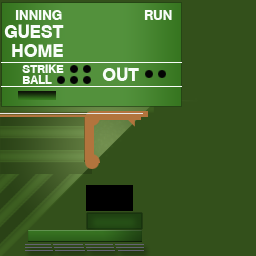
<style>
.page{position:relative;width:256px;height:256px;background:#33501b}
.page>*{position:absolute;margin:0}
.t1{font:14px "AGSchulbuchTwoBQ-Medium";color:#f8fdf9}
.t2{font:18px "AGSchulbuchTwoBQ-Medium";color:#f8fdf9}
.t3{font:12px "AGSchulbuchTwoBQ-Medium";color:#f8fdf9}
</style>
<div class="page">
<p class="t1" style="left:15px;top:10px;width:47px;height:10px">INNING</p>
<p class="t1" style="left:144px;top:10px;width:28px;height:10px">RUN</p>
<p class="t2" style="left:4px;top:24px;width:60px;height:14px">GUEST</p>
<p class="t2" style="left:12px;top:44px;width:51px;height:13px">HOME</p>
<p class="t3" style="left:22px;top:64px;width:42px;height:9px">STRIKE</p>
<p class="t3" style="left:22px;top:75px;width:30px;height:9px">BALL</p>
<p class="t2" style="left:102px;top:67px;width:37px;height:14px">OUT</p>
</div>
